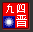
<style>
.page{position:relative;width:33px;height:32px;background:#f20000}
.page>*{position:absolute;margin:0}
.t1{font:10.4px "SimSun";color:#ffffff}
.t2{font:11.7px "SimSun";color:#ffffff}
</style>
<div class="page">
<p class="t1" style="left:6px;top:4px;width:19px;height:9px">九四</p>
<p class="t2" style="left:16px;top:15px;width:11px;height:12px">晋</p>
</div>
